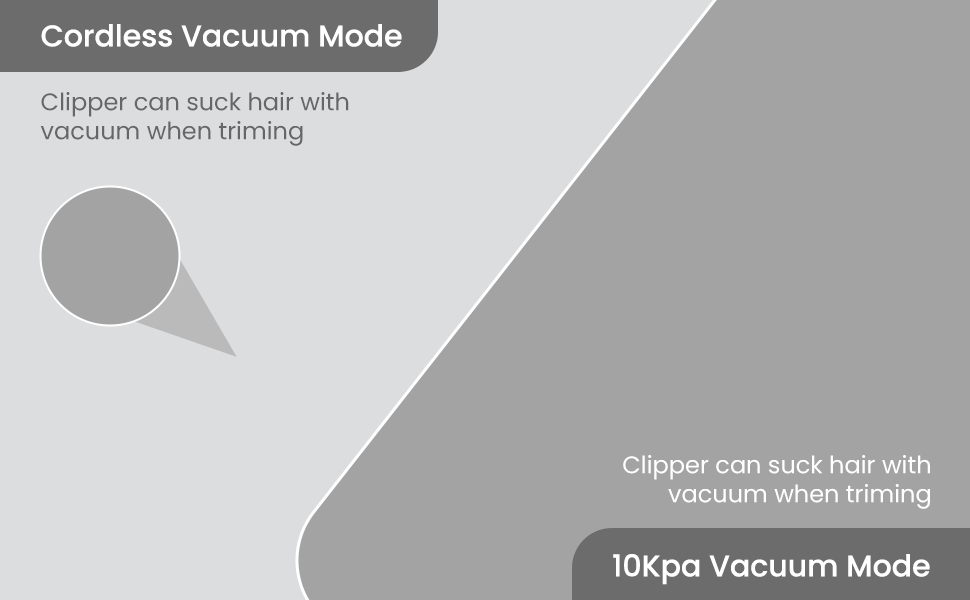
<style>
.page{position:relative;width:970px;height:600px;background:#a3a3a3}
.page>*{position:absolute;margin:0}
.t1{font:30px "Poppins-Medium";color:#ffffff}
.t2{font:24px "Poppins-Regular";color:#666666}
.t3{font:24px "Poppins-Regular";color:#ffffff}
</style>
<div class="page">
<p class="t1" style="left:41px;top:24px;width:361px;height:23px">Cordless Vacuum Mode</p>
<p class="t2" style="left:40px;top:92px;width:309px;height:54px">Clipper can suck hair with<br>vacuum when triming</p>
<p class="t3" style="left:623px;top:455px;width:307px;height:54px;text-align:right">Clipper can suck hair with<br>vacuum when triming</p>
<p class="t1" style="left:613px;top:554px;width:317px;height:31px">10Kpa Vacuum Mode</p>
</div>
